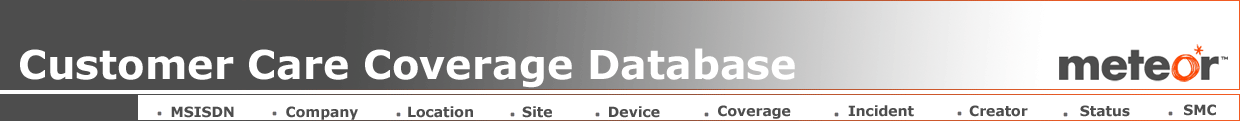
<style>
.page{position:relative;width:1240px;height:121px;background:#ffffff}
.page>*{position:absolute;margin:0}
.t1{font:14px "Verdana-Bold";color:#4d4d4d}
</style>
<div class="page">
<p class="t1" style="left:171px;top:106px;width:63px;height:12px">MSISDN</p>
<p class="t1" style="left:286px;top:106px;width:72px;height:14px">Company</p>
<p class="t1" style="left:408px;top:106px;width:65px;height:12px">Location</p>
<p class="t1" style="left:522px;top:106px;width:30px;height:12px">Site</p>
<p class="t1" style="left:609px;top:106px;width:51px;height:12px">Device</p>
<p class="t1" style="left:718px;top:105px;width:73px;height:14px">Coverage</p>
<p class="t1" style="left:848px;top:105px;width:66px;height:12px">Incident</p>
<p class="t1" style="left:969px;top:105px;width:59px;height:12px">Creator</p>
<p class="t1" style="left:1080px;top:105px;width:50px;height:12px">Status</p>
<p class="t1" style="left:1184px;top:104px;width:32px;height:12px">SMC</p>
</div>
